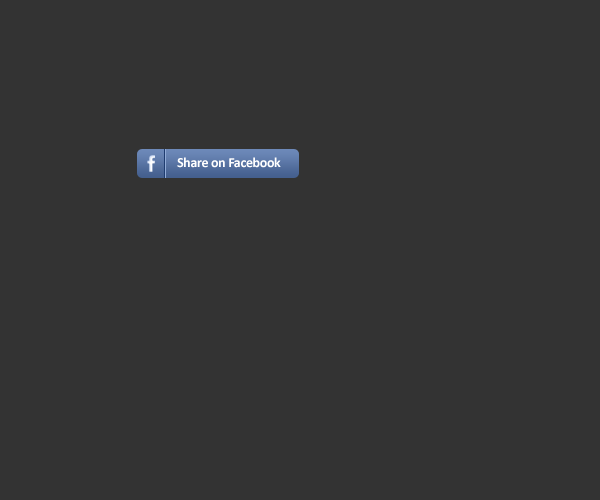
<style>
.page{position:relative;width:600px;height:500px;background:#333333}
.page>*{position:absolute;margin:0}
.t1{font:14px "Calibri-Bold";letter-spacing:-0.025em;color:#ffffff}
</style>
<div class="page">
<p class="t1" style="left:177px;top:157px;width:104px;height:11px">Share on Facebook</p>
</div>
